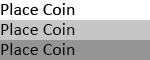
<style>
.page{position:relative;width:150px;height:60px;background:#c7c6c6}
.page>*{position:absolute;margin:0}
.t1{font:18px "Calibri";color:#000000}
</style>
<div class="page">
<p class="t1" style="left:1px;top:3px;width:74px;height:12px">Place Coin</p>
<p class="t1" style="left:1px;top:23px;width:74px;height:12px">Place Coin</p>
<p class="t1" style="left:1px;top:43px;width:74px;height:12px">Place Coin</p>
</div>
